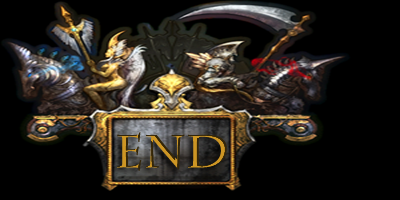
<style>
.page{position:relative;width:400px;height:200px;background:#000000}
.page>*{position:absolute;margin:0}
.t1{font:45.9px "CharlemagneStd-Bold"}
</style>
<div class="page">
<p class="t1" style="left:117px;top:132px;width:110px;height:39px">END</p>
</div>
